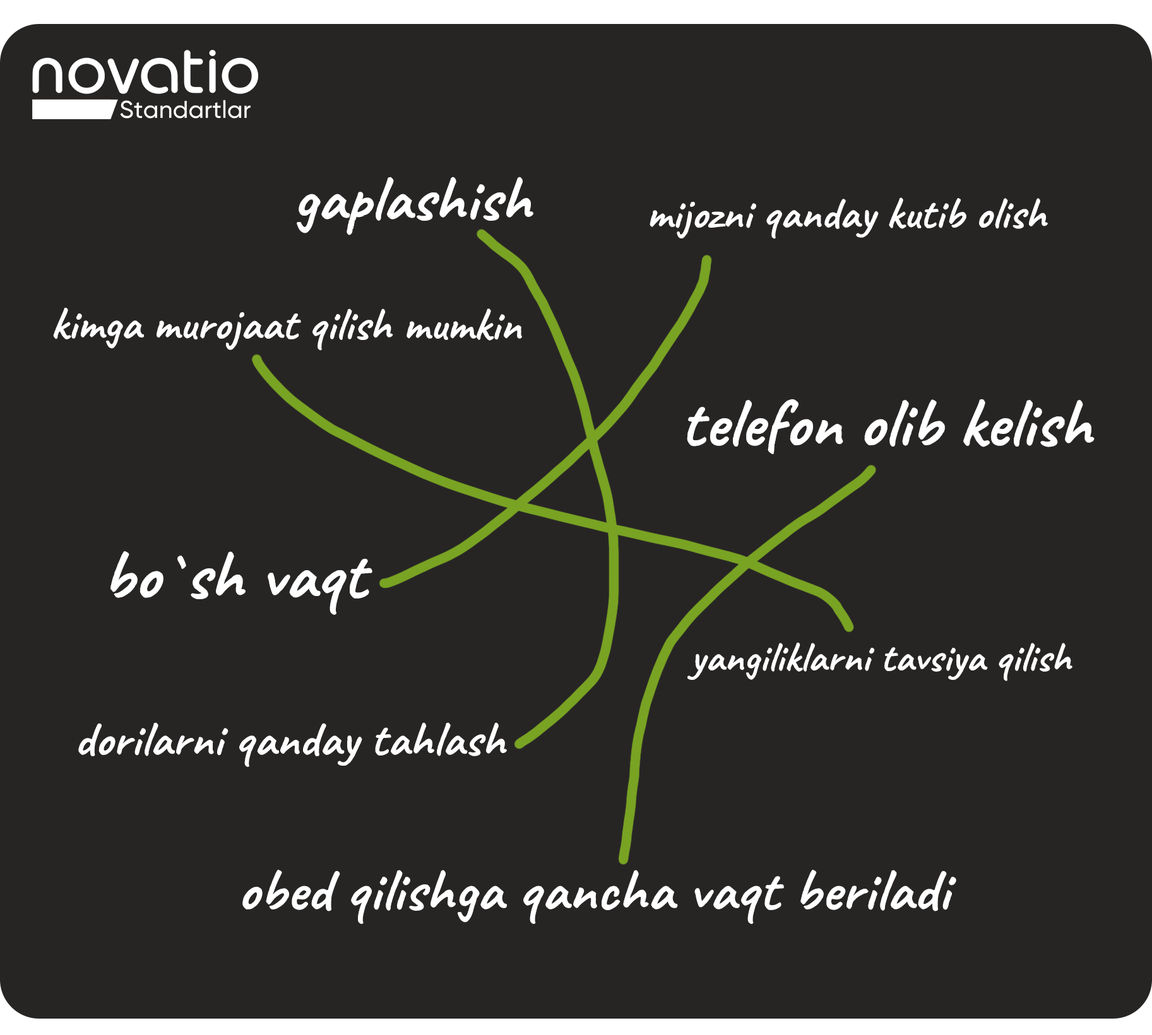
<style>
.page{position:relative;width:1152px;height:1035px;background:#272524}
.page>*{position:absolute;margin:0}
.t1{font:64.3px "Caveat-Bold";letter-spacing:0.005em;color:#ffffff}
.t2{font:44.9px "Caveat-Bold";letter-spacing:0.005em;color:#ffffff}
.t3{font:46.1px "Caveat-Bold";letter-spacing:0.005em;color:#ffffff}
.t4{font:69px "Caveat-Bold";letter-spacing:0.005em;color:#ffffff}
.t5{font:70.2px "Caveat-Bold";letter-spacing:0.005em;color:#ffffff}
.t6{font:42.1px "Caveat-Bold";letter-spacing:0.005em;color:#ffffff}
.t7{font:49.3px "Caveat-Bold";letter-spacing:0.005em;color:#ffffff}
.t8{font:60px "Caveat-Bold";letter-spacing:0.005em;color:#ffffff}
</style>
<div class="page">
<p class="t1" style="left:297px;top:177px;width:236px;height:58px">gaplashish</p>
<p class="t2" style="left:649px;top:198px;width:398px;height:41px">mijozni qanday kutib olish</p>
<p class="t3" style="left:53px;top:308px;width:469px;height:43px">kimga murojaat qilish mumkin</p>
<p class="t4" style="left:687px;top:399px;width:407px;height:55px">telefon olib kelish</p>
<p class="t5" style="left:110px;top:551px;width:262px;height:64px">bo`sh vaqt</p>
<p class="t6" style="left:687px;top:642px;width:385px;height:39px">yangiliklarni tavsiya qilish</p>
<p class="t7" style="left:78px;top:722px;width:429px;height:45px">dorilarni qanday tahlash</p>
<p class="t8" style="left:242px;top:870px;width:714px;height:54px">obed qilishga qancha vaqt beriladi</p>
</div>
